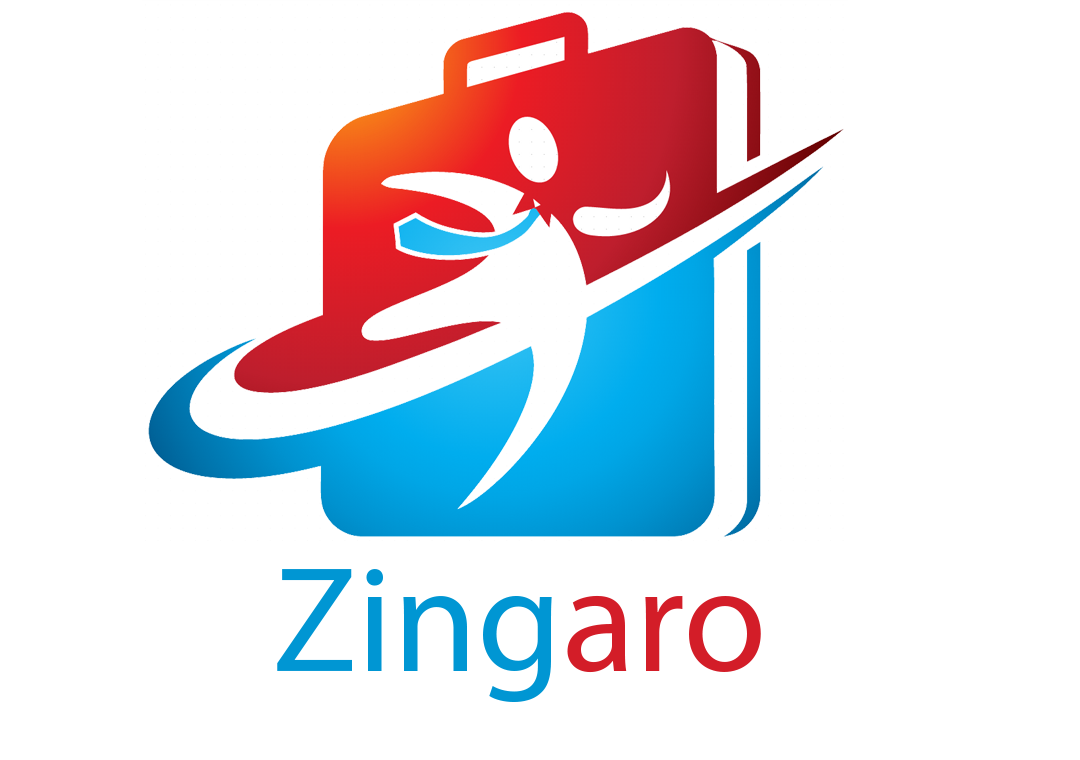
<style>
.page{position:relative;width:1080px;height:760px;background:#ffffff}
.page>*{position:absolute;margin:0}
.t1{font:152px "MyriadPro-Regular";color:#0096d3}
.t2{font:152px "MyriadPro-Regular";color:#d31d28}
</style>
<div class="page">
<p class="t1" style="left:277px;top:569px;width:484px;height:133px">Zing<span class="t2">aro</span></p>
</div>
